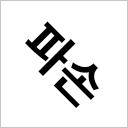
<style>
.page{position:relative;width:128px;height:128px;background:#ffffff}
.page>*{position:absolute;margin:0}
.t1{font:50px "NotoSansCJKkr-Bold";letter-spacing:-0.025em;color:#000000}
</style>
<div class="page">
<p class="t1" style="left:25px;top:21px;width:75px;height:87px;rotate:45deg">파손</p>
</div>
